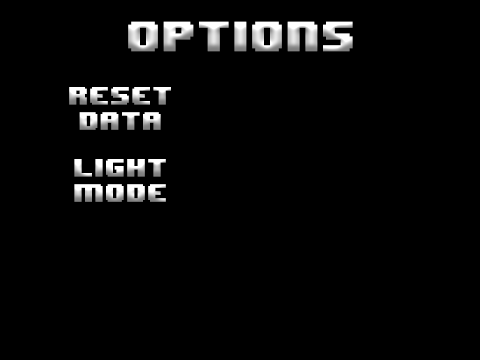
<style>
.page{position:relative;width:480px;height:360px;background:#000000}
.page>*{position:absolute;margin:0}
.t1{font:35.4px "8BITWONDERNominal"}
.t2{font:21.1px "8BITWONDERNominal"}
</style>
<div class="page">
<p class="t1" style="left:128px;top:21px;width:225px;height:31px">options</p>
<p class="t2" style="left:69px;top:87px;width:102px;height:43px;text-align:center">RESET<br>DATA</p>
<p class="t2" style="left:74px;top:159px;width:92px;height:43px;text-align:center">LIGHT<br>MODE</p>
</div>
